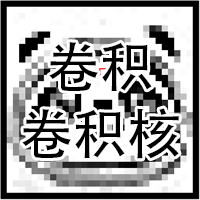
<style>
.page{position:relative;width:200px;height:200px;background:#ffffff}
.page>*{position:absolute;margin:0}
.t1{font:54px/67px "AdobeHeitiStd-Regular";color:#000000}
</style>
<div class="page">
<p class="t1" style="left:22px;top:42px;width:157px;height:117px;text-align:center">卷积<br>卷积核</p>
</div>
